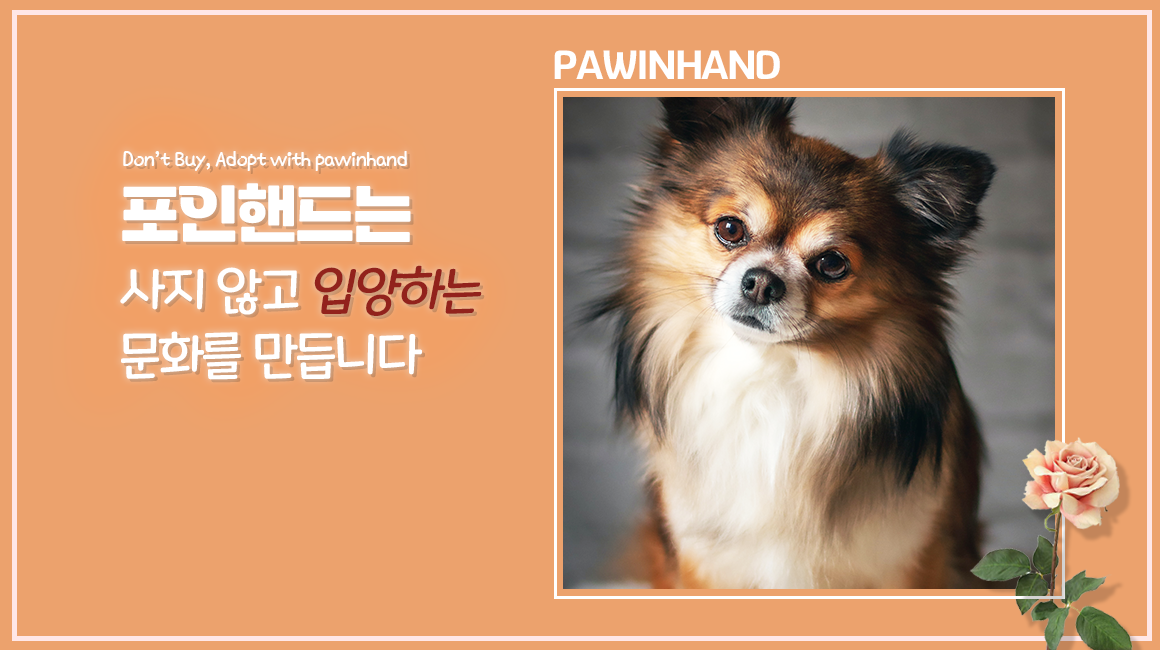
<style>
.page{position:relative;width:1160px;height:650px;background:#eca26d}
.page>*{position:absolute;margin:0}
.t1{font:40px "GyeonggiTitleVOTF";letter-spacing:-0.05em;color:#ffffff}
.t2{font:22px "KNPSBandali-Regular";letter-spacing:-0.05em;color:#ffffff}
.t3{font:52px/65px "MaplestoryLight";letter-spacing:-0.05em;color:#ffffff}
.t4{font:70px/65px "Tenada";letter-spacing:-0.05em;color:#ffffff}
.t5{font:52px/65px "MaplestoryLight";letter-spacing:-0.05em;color:#92221c;font-style:italic}
</style>
<div class="page">
<p class="t1" style="left:554px;top:50px;width:226px;height:29px">PAWINHAND</p>
<p class="t2" style="left:123px;top:151px;width:284px;height:20px">Don’t Buy, Adopt with pawinhand</p>
<p class="t3" style="left:120px;top:183px;width:362px;height:197px"><span class="t4">포인핸드는<br></span>사지 않고 <span class="t5">입양하는<br></span>문화를 만듭니다</p>
</div>
